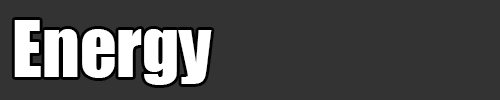
<style>
.page{position:relative;width:500px;height:100px;background:#333333}
.page>*{position:absolute;margin:0}
.t1{font:72px "Impact";color:#ffffff}
</style>
<div class="page">
<p class="t1" style="left:14px;top:20px;width:198px;height:65px">Energy</p>
</div>
